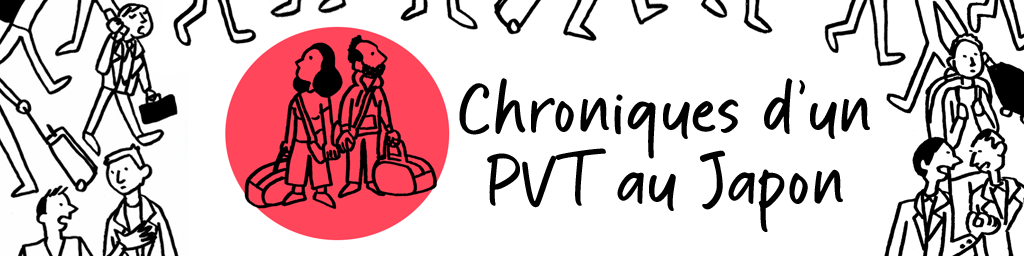
<style>
.page{position:relative;width:1024px;height:256px;background:#ffffff}
.page>*{position:absolute;margin:0}
.t1{font:72px/72px "Wildstripe";color:#000000}
</style>
<div class="page">
<p class="t1" style="left:459px;top:78px;width:411px;height:154px;text-align:center">Chroniques d’un PVT au Japon</p>
</div>
